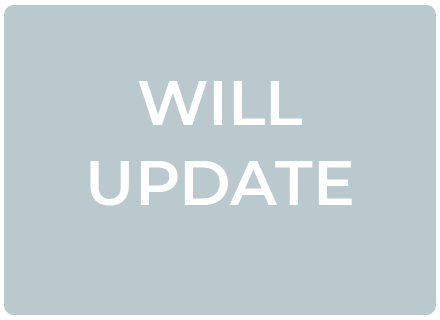
<style>
.page{position:relative;width:440px;height:320px;background:#bac9cd}
.page>*{position:absolute;margin:0}
.t1{font:62.5px/79.8px "Montserrat-SemiBold";color:#ffffff;text-transform:uppercase}
</style>
<div class="page">
<p class="t1" style="left:90px;top:81px;width:262px;height:125px;text-align:center">Will Update</p>
</div>
